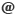
<style>
.page{position:relative;width:16px;height:16px;background:#ffffff}
.page>*{position:absolute;margin:0}
.t1{font:18px "BritannicBold";color:#373737}
</style>
<div class="page">
<p class="t1" style="left:1px;top:2px;width:14px;height:12px">@</p>
</div>
